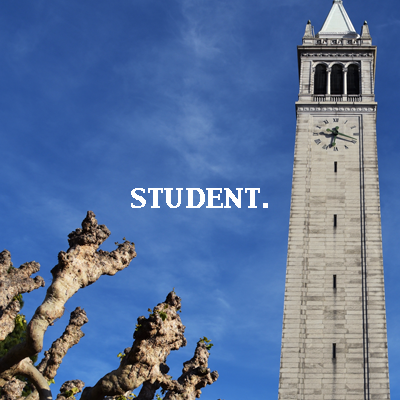
<style>
.page{position:relative;width:400px;height:400px}
.page>*{position:absolute;margin:0}
.t1{font:30px "CapitalsRegular";color:#ffffff}
</style>
<div class="page">
<p class="t1" style="left:131px;top:188px;width:137px;height:20px">student.</p>
</div>
